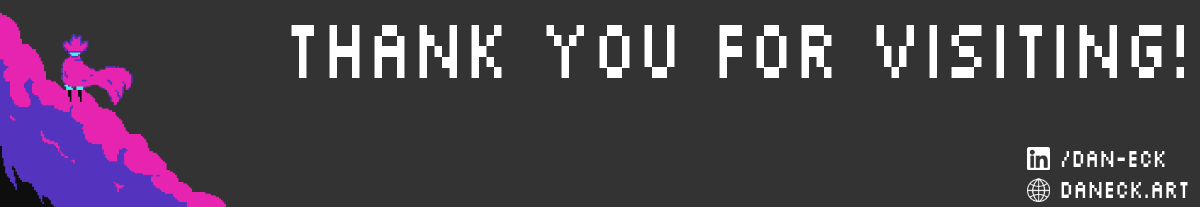
<style>
.page{position:relative;width:1200px;height:207px;background:#333333}
.page>*{position:absolute;margin:0}
.t1{font:84.6px "Silkscreen-Regular";color:#ffffff;scale:0.71 1}
.t2{font:26.3px "Silkscreen-Regular";color:#ffffff;scale:0.71 1}
</style>
<div class="page">
<p class="t1" style="left:291px;top:25px;width:893px;height:53px">Thank you for Visiting!</p>
<p class="t2" style="left:1061px;top:151px;width:104px;height:16px">/dan-eck</p>
<p class="t2" style="left:1061px;top:182px;width:127px;height:16px">daneck.art</p>
</div>
